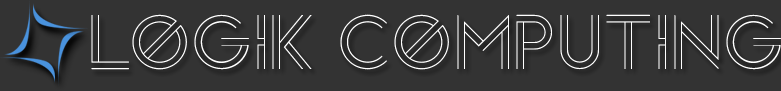
<style>
.page{position:relative;width:781px;height:91px;background:#333333}
.page>*{position:absolute;margin:0}
.t1{font:72px "Arenq";letter-spacing:0.022em;color:#ffffff}
</style>
<div class="page">
<p class="t1" style="left:91px;top:14px;width:690px;height:56px">Logik Computing</p>
</div>
